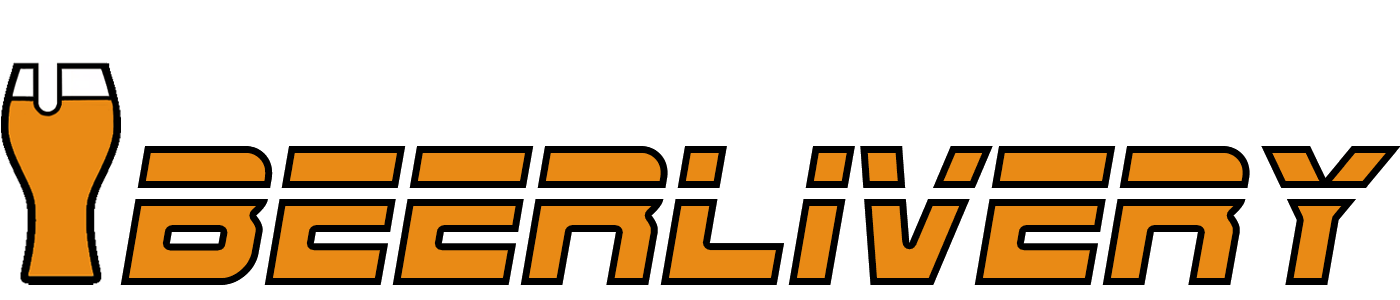
<style>
.page{position:relative;width:1400px;height:300px;background:#ffffff}
.page>*{position:absolute;margin:0}
.t1{font:209.5px "SFSportsNight"}
</style>
<div class="page">
<p class="t1" style="left:120px;top:146px;width:1281px;height:139px">Beerlivery</p>
</div>
